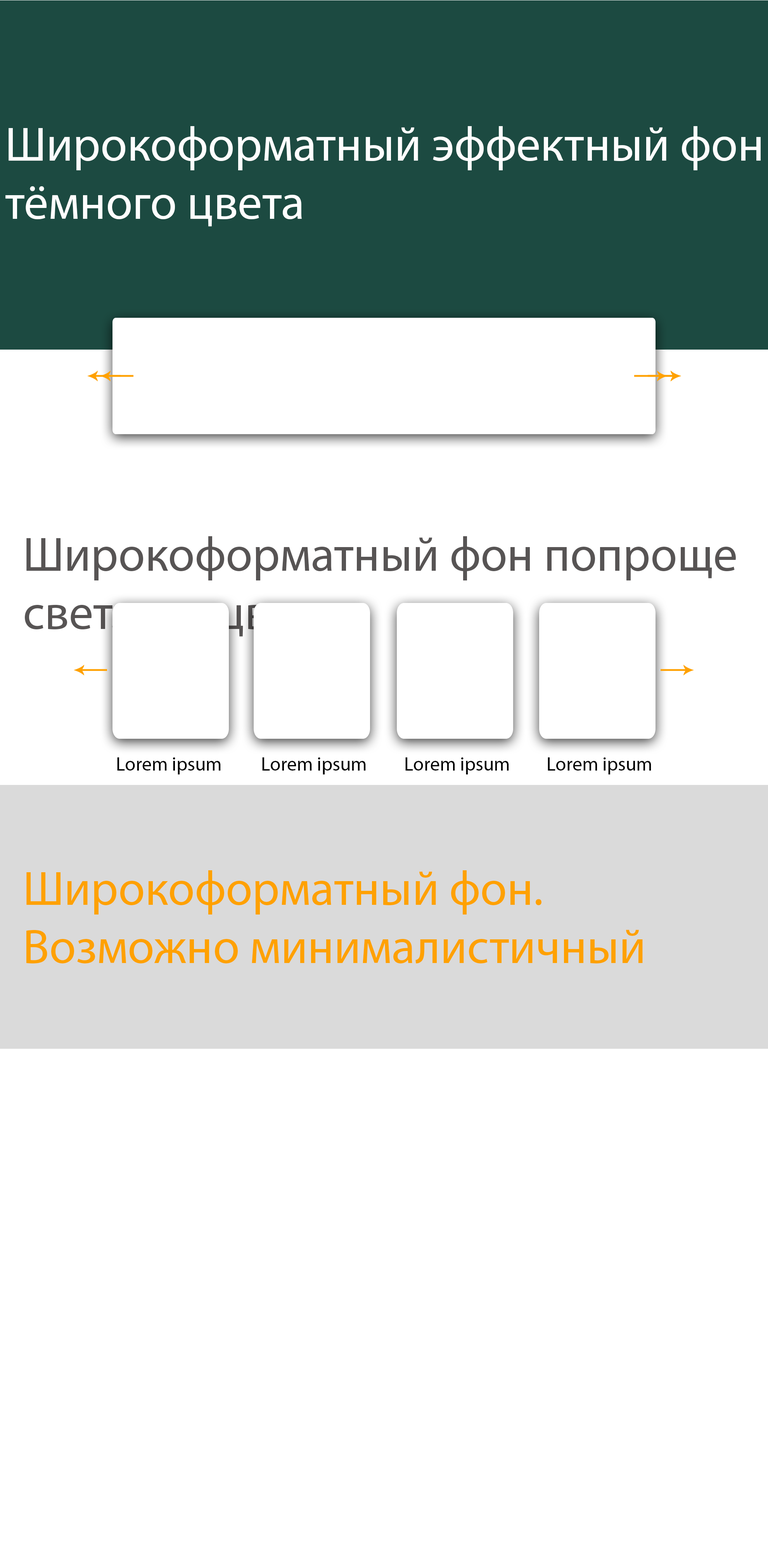
<style>
.page{position:relative;width:768px;height:1552px;background:#ffffff}
.page>*{position:absolute;margin:0}
.t1{font:48.5px "MyriadPro-Regular";color:#fefefe}
.t2{font:48.5px "MyriadPro-Regular";color:#575454}
.t3{font:19.4px "MyriadPro-Regular";color:#000000}
.t4{font:48.5px "MyriadPro-Regular";color:#ffa101}
</style>
<div class="page">
<p class="t1" style="left:5px;top:126px;width:756px;height:101px">Широкоформатный эффектный фон<br>тёмного цвета</p>
<p class="t2" style="left:25px;top:536px;width:711px;height:101px">Широкоформатный фон попроще светлого цвета</p>
<p class="t3" style="left:117px;top:757px;width:104px;height:17px">Lorem ipsum</p>
<p class="t3" style="left:262px;top:757px;width:104px;height:17px">Lorem ipsum</p>
<p class="t3" style="left:405px;top:757px;width:104px;height:17px">Lorem ipsum</p>
<p class="t3" style="left:548px;top:757px;width:103px;height:17px">Lorem ipsum</p>
<p class="t4" style="left:26px;top:870px;width:617px;height:94px">Широкоформатный фон. <br>Возможно минималистичный</p>
</div>
